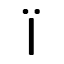
<style>
.page{position:relative;width:64px;height:64px;background:#ffffff}
.page>*{position:absolute;margin:0}
.t1{font:58.3px "Calibri";color:#000000}
</style>
<div class="page">
<p class="t1" style="left:22px;top:9px;width:18px;height:46px">Ї</p>
</div>
